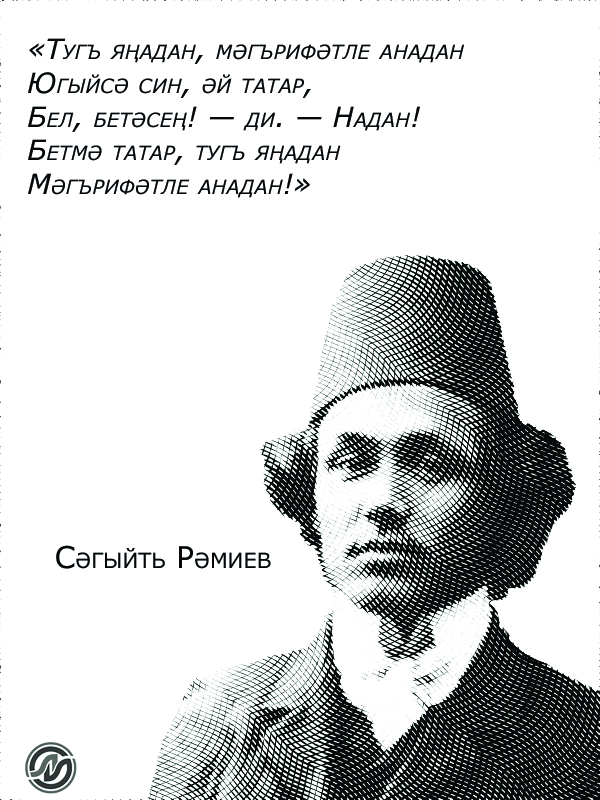
<style>
.page{position:relative;width:600px;height:800px;background:#ffffff}
.page>*{position:absolute;margin:0}
.t1{font:28px "Verdana-Italic";color:#000000;font-variant:small-caps}
.t2{font:30px "Verdana";color:#050708;font-variant:small-caps}
</style>
<div class="page">
<p class="t1" style="left:28px;top:38px;width:436px;height:160px">«Тугъ яңадан, мәгърифәтле анадан<br>Югыйсә син, әй татар,<br>Бел, бетәсең! — ди. — Надан!<br>Бетмә татар, тугъ яңадан<br>Мәгърифәтле анадан!»</p>
<p class="t2" style="left:56px;top:545px;width:215px;height:24px">Сәгыйть Рәмиев</p>
</div>
